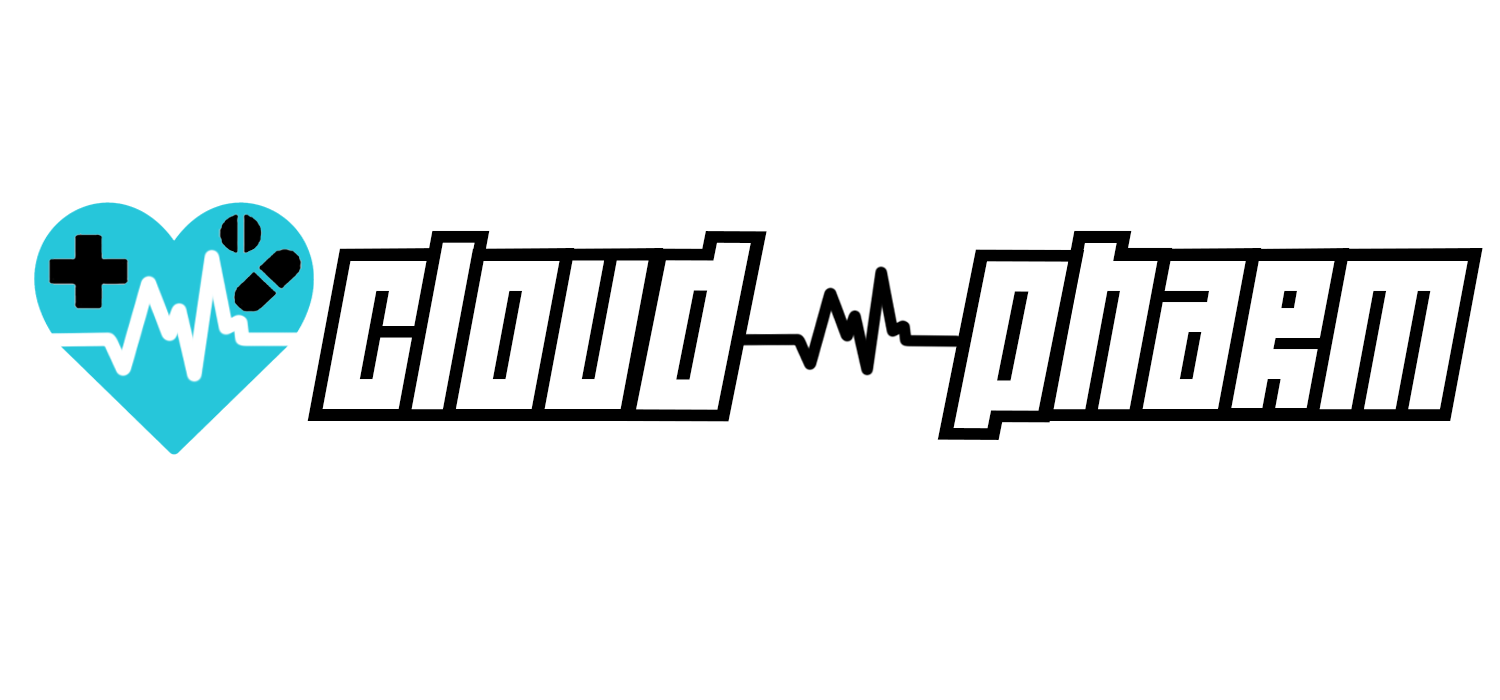
<style>
.page{position:relative;width:1500px;height:700px;background:#ffffff}
.page>*{position:absolute;margin:0}
.t1{font:198.2px "Wideawake";color:#000000;scale:1.06 1}
.t2{font:198.2px "Wideawake";color:#000000;scale:1.14 1}
</style>
<div class="page">
<p class="t1" style="left:307px;top:230px;width:1176px;height:191px">Clou    harm</p>
<p class="t2" style="left:620px;top:231px;width:465px;height:209px">d  P</p>
</div>
